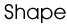
<style>
.page{position:relative;width:67px;height:26px;background:#ffffff}
.page>*{position:absolute;margin:0}
.t1{font:20px "Atlanta-Book";color:#000000}
</style>
<div class="page">
<p class="t1" style="left:4px;top:4px;width:62px;height:19px">Shape</p>
</div>
